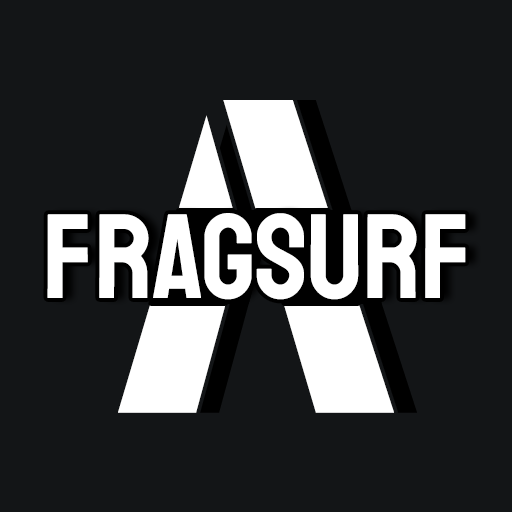
<style>
.page{position:relative;width:512px;height:512px;background:#131517}
.page>*{position:absolute;margin:0}
.t1{font:600px "BlackOpsOne-Regular";color:#ffffff;text-transform:uppercase}
.t2{font:120px "Staatliches-Regular";color:#ffffff;text-transform:uppercase}
</style>
<div class="page">
<p class="t1" style="left:118px;top:100px;width:276px;height:313px">^</p>
<p class="t2" style="left:47px;top:213px;width:419px;height:87px">fragsurf</p>
</div>
